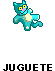
<style>
.page{position:relative;width:55px;height:71px;background:#ffffff}
.page>*{position:absolute;margin:0}
.t1{font:10.3px "Arial-BoldMT";color:#000000;scale:1.11 1}
</style>
<div class="page">
<p class="t1" style="left:3px;top:64px;width:49px;height:7px">JUGUETE</p>
</div>
